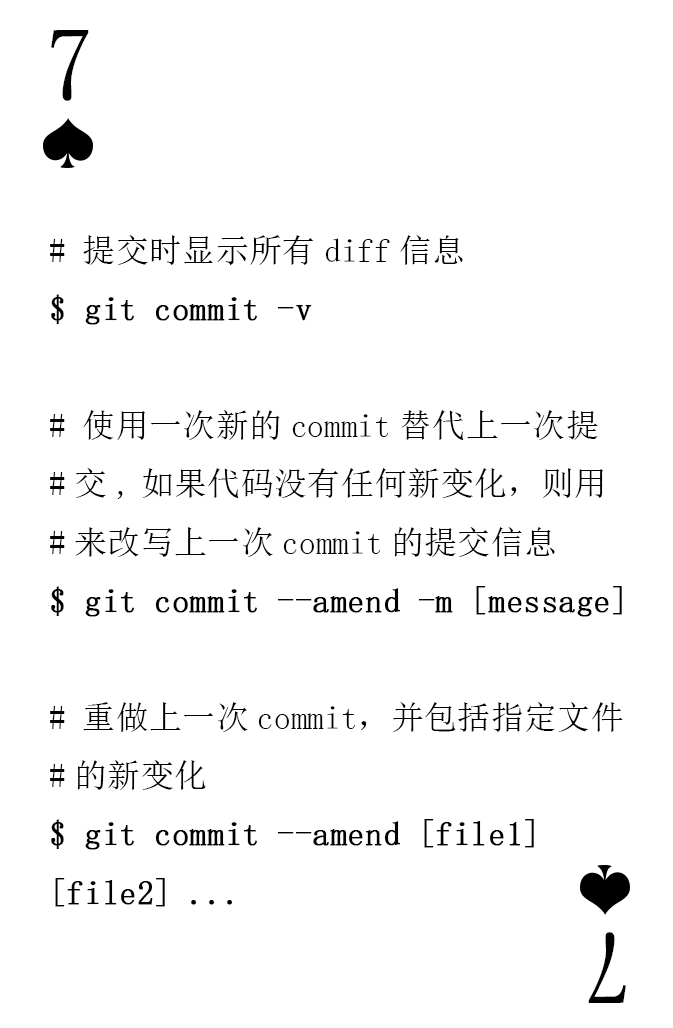
<style>
.page{position:relative;width:673px;height:1028px;background:#ffffff}
.page>*{position:absolute;margin:0}
.t1{font:104.2px "SimSun-ExtB";color:#010101;scale:0.93 1}
.t2{font:33.3px "SimSun";color:#000000}
.t3{font:33.3px "SimSun";color:#000000;font-weight:bold}
</style>
<div class="page">
<p class="t1" style="left:51px;top:30px;width:38px;height:71px">7</p>
<p class="t2" style="left:50px;top:235px;width:573px;height:672px"># 提交时显示所有diff信息<br><span class="t3">$ git commit -v<br></span><br># 使用一次新的commit替代上一次提<br>#交,如果代码没有任何新变化，则用<br>#来改写上一次commit的提交信息<br><span class="t3">$ git commit --amend -m [message]<br></span><br># 重做上一次commit，并包括指定文件<br>#的新变化<br><span class="t3">$ git commit --amend [file1] <br>[file2] ...</span></p>
<p class="t1" style="left:588px;top:932px;width:38px;height:71px;rotate:180deg">7</p>
</div>
